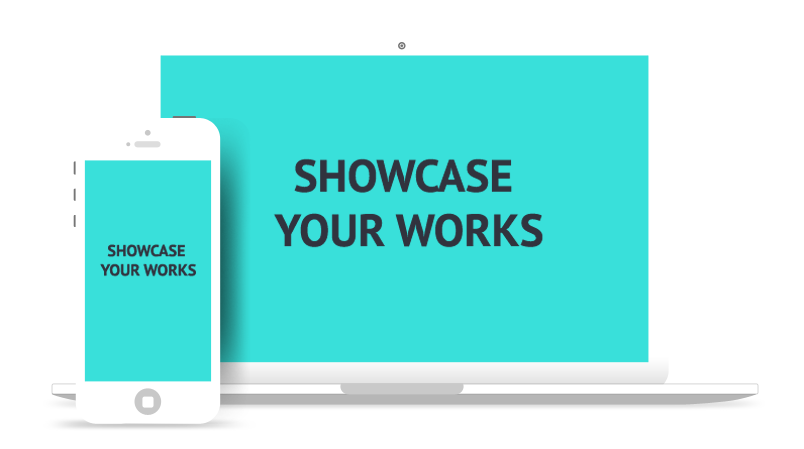
<style>
.page{position:relative;width:804px;height:449px;background:#ffffff}
.page>*{position:absolute;margin:0}
.t1{font:45.4px "PTSans-Bold";color:#31333e;text-transform:uppercase}
.t2{font:16.1px "PTSans-Bold";color:#31333e;text-transform:uppercase}
</style>
<div class="page">
<p class="t1" style="left:273px;top:158px;width:270px;height:90px;text-align:center">Showcase <br>your Works</p>
<p class="t2" style="left:99px;top:244px;width:97px;height:33px;text-align:center">Showcase <br>your Works</p>
</div>
